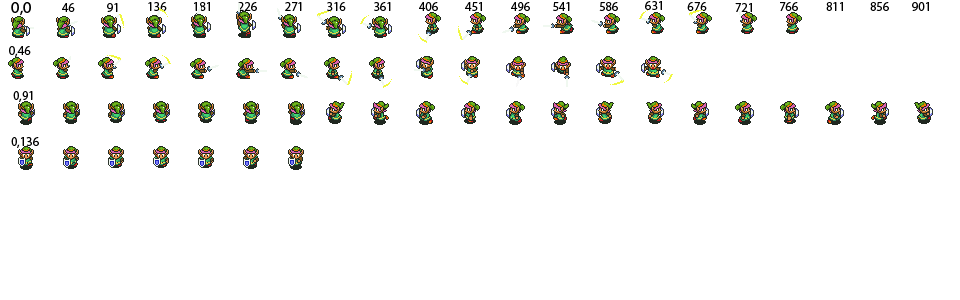
<style>
.page{position:relative;width:960px;height:300px;background:#ffffff}
.page>*{position:absolute;margin:0}
.t1{font:16.7px "MyriadPro-Regular";color:#000000}
.t2{font:12.5px "MyriadPro-Regular";color:#000000}
</style>
<div class="page">
<p class="t1" style="left:11px;top:2px;width:20px;height:14px">0,0</p>
<p class="t2" style="left:62px;top:3px;width:13px;height:9px">46</p>
<p class="t2" style="left:107px;top:3px;width:11px;height:9px">91</p>
<p class="t2" style="left:148px;top:2px;width:19px;height:9px">136</p>
<p class="t2" style="left:194px;top:2px;width:16px;height:9px">181</p>
<p class="t2" style="left:238px;top:2px;width:19px;height:9px">226</p>
<p class="t2" style="left:285px;top:2px;width:17px;height:9px">271</p>
<p class="t2" style="left:327px;top:2px;width:19px;height:9px">316</p>
<p class="t2" style="left:374px;top:2px;width:17px;height:9px">361</p>
<p class="t2" style="left:419px;top:2px;width:19px;height:9px">406</p>
<p class="t2" style="left:465px;top:2px;width:17px;height:9px">451</p>
<p class="t2" style="left:511px;top:2px;width:19px;height:9px">496</p>
<p class="t2" style="left:553px;top:2px;width:17px;height:9px">541</p>
<p class="t2" style="left:599px;top:2px;width:19px;height:9px">586</p>
<p class="t2" style="left:645px;top:1px;width:17px;height:9px">631</p>
<p class="t2" style="left:687px;top:2px;width:20px;height:9px">676</p>
<p class="t2" style="left:735px;top:3px;width:17px;height:9px">721</p>
<p class="t2" style="left:780px;top:2px;width:18px;height:9px">766</p>
<p class="t2" style="left:826px;top:2px;width:17px;height:9px">811</p>
<p class="t2" style="left:870px;top:2px;width:19px;height:9px">856</p>
<p class="t2" style="left:912px;top:2px;width:17px;height:9px">901</p>
<p class="t2" style="left:9px;top:46px;width:22px;height:11px">0,46</p>
<p class="t2" style="left:13px;top:91px;width:20px;height:11px">0,91</p>
<p class="t2" style="left:11px;top:137px;width:28px;height:11px">0,136</p>
</div>
